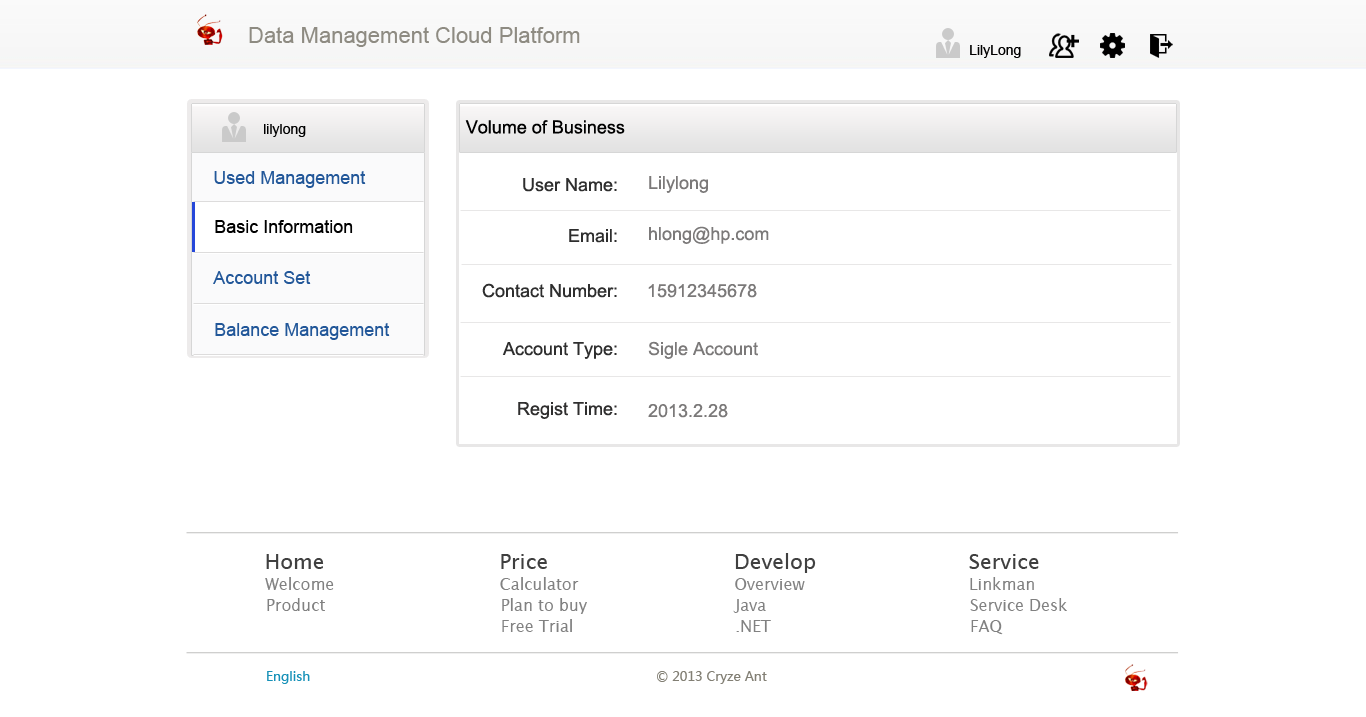
<style>
.page{position:relative;width:1366px;height:717px;background:#ffffff}
.page>*{position:absolute;margin:0}
.t1{font:22px "ArialMT";color:#8e8b82}
.t2{font:14px "ArialMT";color:#000000}
.t3{font:18px "ArialMT";color:#000000}
.t4{font:18px "ArialMT";color:#225799}
.t5{font:18px "ArialMT";color:#2e2e2e}
.t6{font:18px "ArialMT";color:#7b7979}
.t7{font:18px "ArialMT";color:#2f2e2e}
.t8{font:21px "LucidaSans";color:#404040}
.t9{font:21px "LucidaSans";color:#3f3f3f}
.t10{font:16px "LucidaSans";color:#818181}
.t11{font:13px "MicrosoftYaHei";color:#1791b8}
.t12{font:13px "MicrosoftYaHei";color:#827f74}
</style>
<div class="page">
<p class="t1" style="left:249px;top:27px;width:331px;height:20px">Data Management Cloud Platform</p>
<p class="t2" style="left:970px;top:45px;width:51px;height:13px">LilyLong</p>
<p class="t2" style="left:264px;top:124px;width:42px;height:13px">lilylong</p>
<p class="t3" style="left:465px;top:120px;width:160px;height:14px">Volume of Business</p>
<p class="t4" style="left:214px;top:171px;width:152px;height:17px">Used Management</p>
<p class="t5" style="left:523px;top:178px;width:94px;height:14px">User Name:</p>
<p class="t6" style="left:649px;top:176px;width:59px;height:17px">Lilylong</p>
<p class="t3" style="left:215px;top:220px;width:138px;height:13px">Basic Information</p>
<p class="t5" style="left:569px;top:229px;width:48px;height:14px">Email:</p>
<p class="t6" style="left:649px;top:226px;width:120px;height:18px">hlong@hp.com</p>
<p class="t4" style="left:213px;top:271px;width:98px;height:13px">Account Set</p>
<p class="t5" style="left:482px;top:283px;width:135px;height:15px">Contact Number:</p>
<p class="t6" style="left:648px;top:284px;width:109px;height:14px">15912345678</p>
<p class="t4" style="left:215px;top:323px;width:175px;height:17px">Balance Management</p>
<p class="t5" style="left:502px;top:342px;width:115px;height:17px">Account Type:</p>
<p class="t6" style="left:648px;top:341px;width:110px;height:18px">Sigle Account</p>
<p class="t7" style="left:518px;top:402px;width:99px;height:17px">Regist Time:</p>
<p class="t6" style="left:648px;top:404px;width:80px;height:14px">2013.2.28</p>
<p class="t8" style="left:266px;top:554px;width:58px;height:15px">Home</p>
<p class="t9" style="left:501px;top:554px;width:46px;height:15px">Price</p>
<p class="t8" style="left:735px;top:553px;width:81px;height:20px">Develop</p>
<p class="t9" style="left:969px;top:554px;width:70px;height:15px">Service</p>
<p class="t10" style="left:265px;top:577px;width:69px;height:13px">Welcome</p>
<p class="t10" style="left:500px;top:577px;width:79px;height:13px">Calculator</p>
<p class="t10" style="left:735px;top:578px;width:70px;height:12px">Overview</p>
<p class="t10" style="left:970px;top:577px;width:64px;height:13px">Linkman</p>
<p class="t10" style="left:267px;top:598px;width:58px;height:13px">Product</p>
<p class="t10" style="left:502px;top:598px;width:85px;height:16px">Plan to buy</p>
<p class="t10" style="left:733px;top:599px;width:33px;height:14px">Java</p>
<p class="t10" style="left:970px;top:598px;width:97px;height:13px">Service Desk</p>
<p class="t10" style="left:502px;top:619px;width:70px;height:13px">Free Trial</p>
<p class="t10" style="left:736px;top:620px;width:35px;height:12px">.NET</p>
<p class="t10" style="left:971px;top:620px;width:32px;height:15px">FAQ</p>
<p class="t11" style="left:267px;top:671px;width:43px;height:13px">English</p>
<p class="t12" style="left:657px;top:671px;width:110px;height:13px">© 2013 Cryze Ant</p>
</div>
